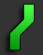
<style>
.page{position:relative;width:43px;height:55px;background:#333333}
.page>*{position:absolute;margin:0}
.t1{font:63.9px "Whitestone-Bold"}
</style>
<div class="page">
<p class="t1" style="left:10px;top:4px;width:24px;height:46px">/</p>
</div>
